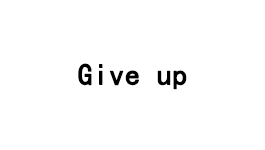
<style>
.page{position:relative;width:265px;height:150px;background:#ffffff}
.page>*{position:absolute;margin:0}
.t1{font:30px "SimHei";color:#000000;font-weight:bold}
</style>
<div class="page">
<p class="t1" style="left:78px;top:63px;width:109px;height:27px">Give up</p>
</div>
